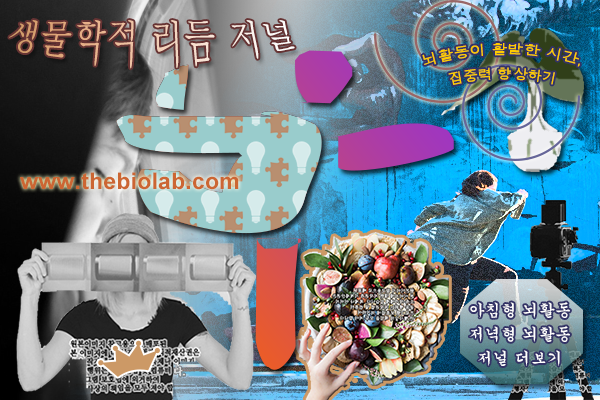
<style>
.page{position:relative;width:600px;height:400px}
.page>*{position:absolute;margin:0}
.t1{font:32px "Batang";letter-spacing:0.01em}
.t2{font:14px "Dotum";letter-spacing:0.01em;color:#ffcc00}
.t3{font:23px "Arial-BoldMT";letter-spacing:0.01em;color:#cc6633}
.t4{font:16px/24px "Gungsuh";letter-spacing:0.01em;color:#ffffff}
</style>
<div class="page">
<p class="t1" style="left:9px;top:20px;width:286px;height:49px">생물학적 리듬 저널</p>
<p class="t2" style="left:422px;top:43px;width:158px;height:42px;text-align:center">뇌활동이 활발한 시간,<br>집중력 향상하기</p>
<p class="t3" style="left:20px;top:172px;width:219px;height:18px">www.thebiolab.com</p>
<p class="t4" style="left:469px;top:302px;width:101px;height:64px;text-align:center">아침형 뇌활동<br>저녁형 뇌활동<br>저널 더보기</p>
</div>
